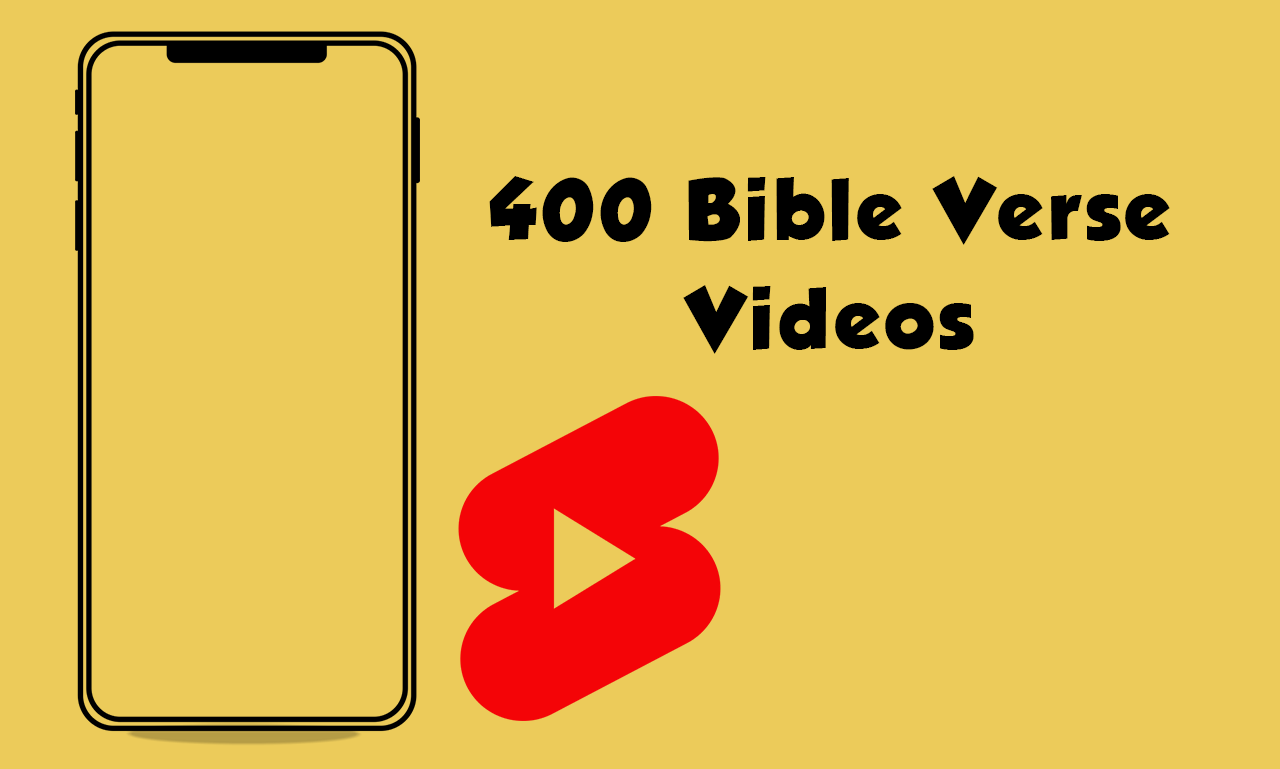
<style>
.page{position:relative;width:1280px;height:769px;background:#eccb5a}
.page>*{position:absolute;margin:0}
.t1{font:76px/108.8px "GROBOLD";letter-spacing:0.08em;color:#000000}
</style>
<div class="page">
<p class="t1" style="left:489px;top:176px;width:681px;height:178px;text-align:center">400 Bible Verse<br>Videos</p>
</div>
